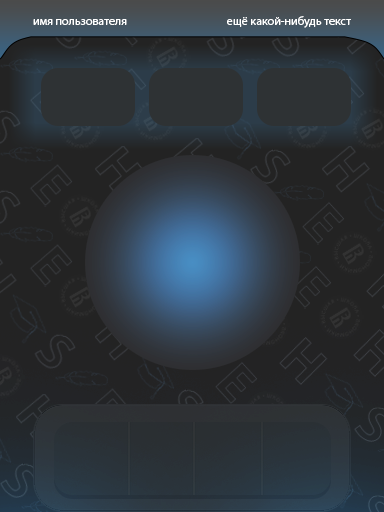
<style>
.page{position:relative;width:384px;height:512px}
.page>*{position:absolute;margin:0}
.t1{font:12px "MyriadPro-Regular";color:#ffffff}
</style>
<div class="page">
<p class="t1" style="left:227px;top:16px;width:124px;height:12px">ещё какой-нибудь текст</p>
<p class="t1" style="left:33px;top:19px;width:94px;height:6px">имя пользователя</p>
</div>
